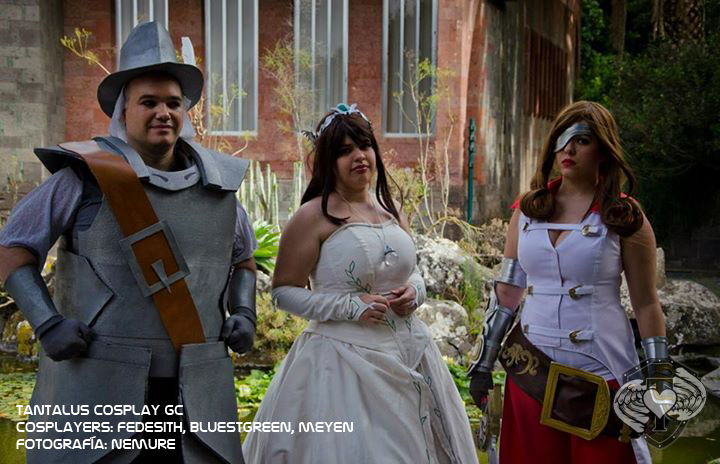
<style>
.page{position:relative;width:720px;height:464px}
.page>*{position:absolute;margin:0}
.t1{font:14px "NasalizationRg-Regular";color:#ffffff}
</style>
<div class="page">
<p class="t1" style="left:16px;top:405px;width:337px;height:44px">tantalus cosplay gc<br>cosplayers: fedesith, bluestgreen, meyen<br>fotografía: nemure</p>
</div>
